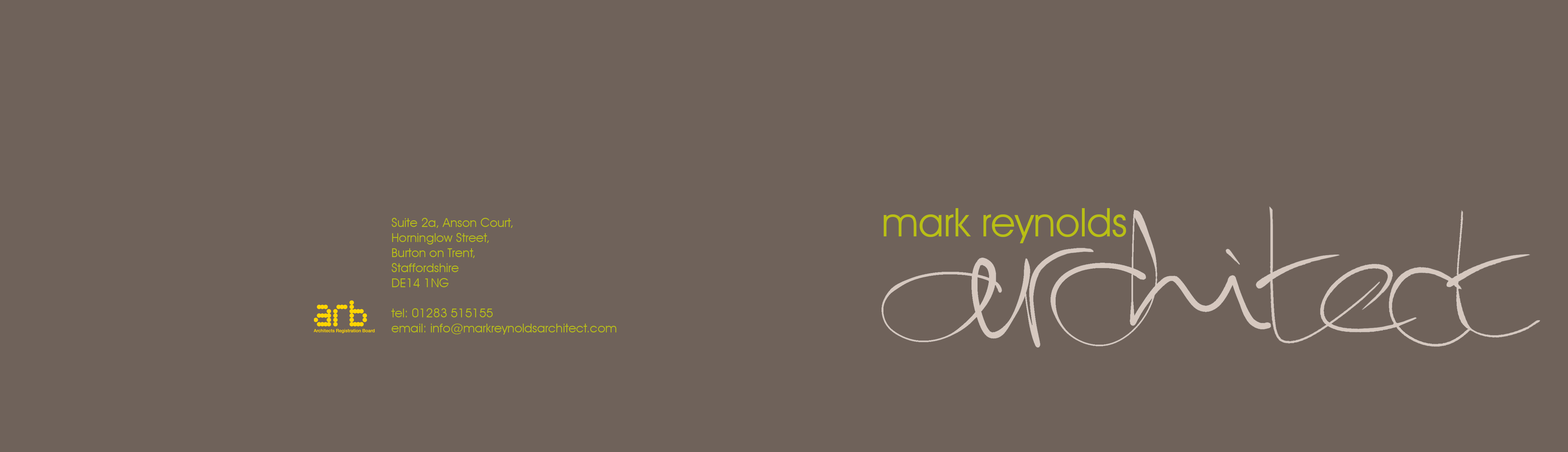
<style>
.page{position:relative;width:1568px;height:452px;background:#6f625a}
.page>*{position:absolute;margin:0}
.t1{font:39.7px "AvantGardeITCbyBT-Book";color:#b9bf15}
.t2{font:12.5px "AvantGardeITCbyBT-Book";color:#b9bf15}
</style>
<div class="page">
<p class="t1" style="left:884px;top:208px;width:242px;height:35px">mark reynolds</p>
<p class="t2" style="left:391px;top:218px;width:226px;height:116px">Suite 2a, Anson Court, <br>Horninglow Street, <br>Burton on Trent,<br>Staffordshire<br>DE14 1NG<br><br>tel: 01283 515155<br>email: info@markreynoldsarchitect.com</p>
</div>
